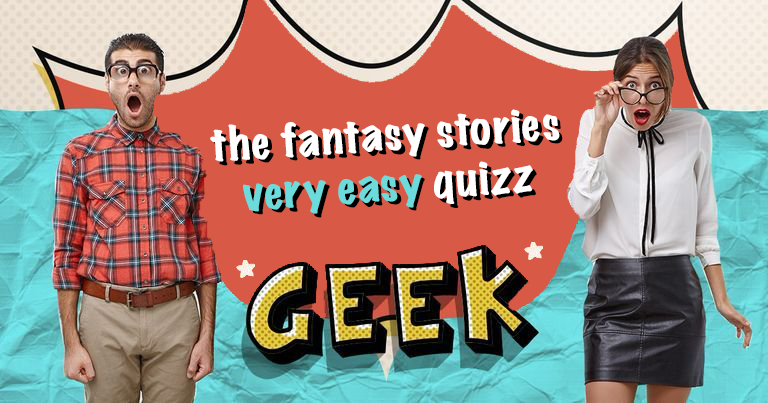
<style>
.page{position:relative;width:768px;height:403px;background:#d85946}
.page>*{position:absolute;margin:0}
.t1{font:42.1px "MarkerFelt-Wide";color:#ffffff}
.t2{font:42.1px "MarkerFelt-Wide";color:#6cdbdb}
.t3{font:42.1px "MarkerFelt-Wide"}
</style>
<div class="page">
<p class="t1" style="left:210px;top:109px;width:350px;height:105px;text-align:center;rotate:-4deg">the fantasy stories <br><span class="t2">very easy</span> quizz</p>
<p class="t3" style="left:214px;top:112px;width:349px;height:106px;text-align:center;rotate:-4deg">the fantasy stories <br>very easy quizz</p>
</div>
